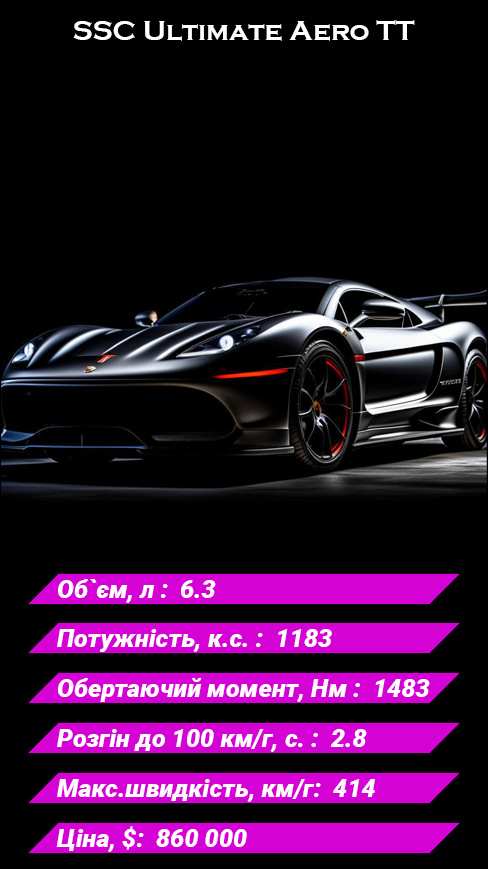
<style>
.page{position:relative;width:488px;height:869px;background:#000000}
.page>*{position:absolute;margin:0}
.t1{font:28px "CopperplateGothic-Bold";color:#ffffff}
.t2{font:25px "Roboto-BlackItalic";color:#ffffff}
</style>
<div class="page">
<p class="t1" style="left:73px;top:20px;width:342px;height:21px">SSC Ultimate Aero TT</p>
<p class="t2" style="left:58px;top:579px;width:158px;height:24px">Об`єм, л :  6.3</p>
<p class="t2" style="left:57px;top:629px;width:275px;height:23px">Потужність, к.с. :  1183</p>
<p class="t2" style="left:58px;top:678px;width:372px;height:24px">Обертаючий момент, Нм :  1483</p>
<p class="t2" style="left:57px;top:729px;width:310px;height:23px">Розгін до 100 км/г, с. :  2.8</p>
<p class="t2" style="left:57px;top:779px;width:318px;height:23px">Макс.швидкість, км/г:  414</p>
<p class="t2" style="left:56px;top:826px;width:191px;height:26px">Ціна, $:  860 000</p>
</div>
